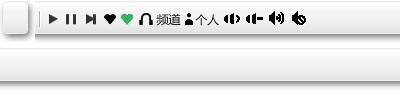
<style>
.page{position:relative;width:400px;height:100px}
.page>*{position:absolute;margin:0}
.t1{font:12px "MicrosoftYaHei";color:#191a1a}
</style>
<div class="page">
<p class="t1" style="left:156px;top:13px;width:25px;height:13px">频道</p>
<p class="t1" style="left:195px;top:14px;width:24px;height:12px">个人</p>
</div>
